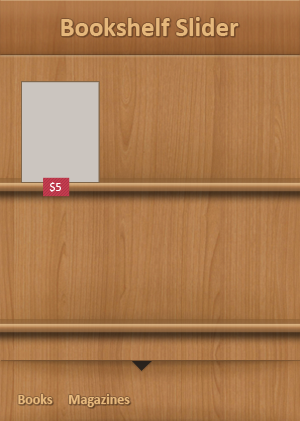
<style>
.page{position:relative;width:300px;height:421px}
.page>*{position:absolute;margin:0}
.t1{font:26.8px "Calibri-Bold";color:#e5b77b}
.t2{font:12px "Calibri";color:#ffffff}
.t3{font:14px "Calibri-Bold";color:#e7b97d}
</style>
<div class="page">
<p class="t1" style="left:61px;top:17px;width:178px;height:19px">Bookshelf Slider</p>
<p class="t2" style="left:49px;top:182px;width:12px;height:10px">$5</p>
<p class="t3" style="left:18px;top:394px;width:112px;height:13px">Books     Magazines</p>
</div>
